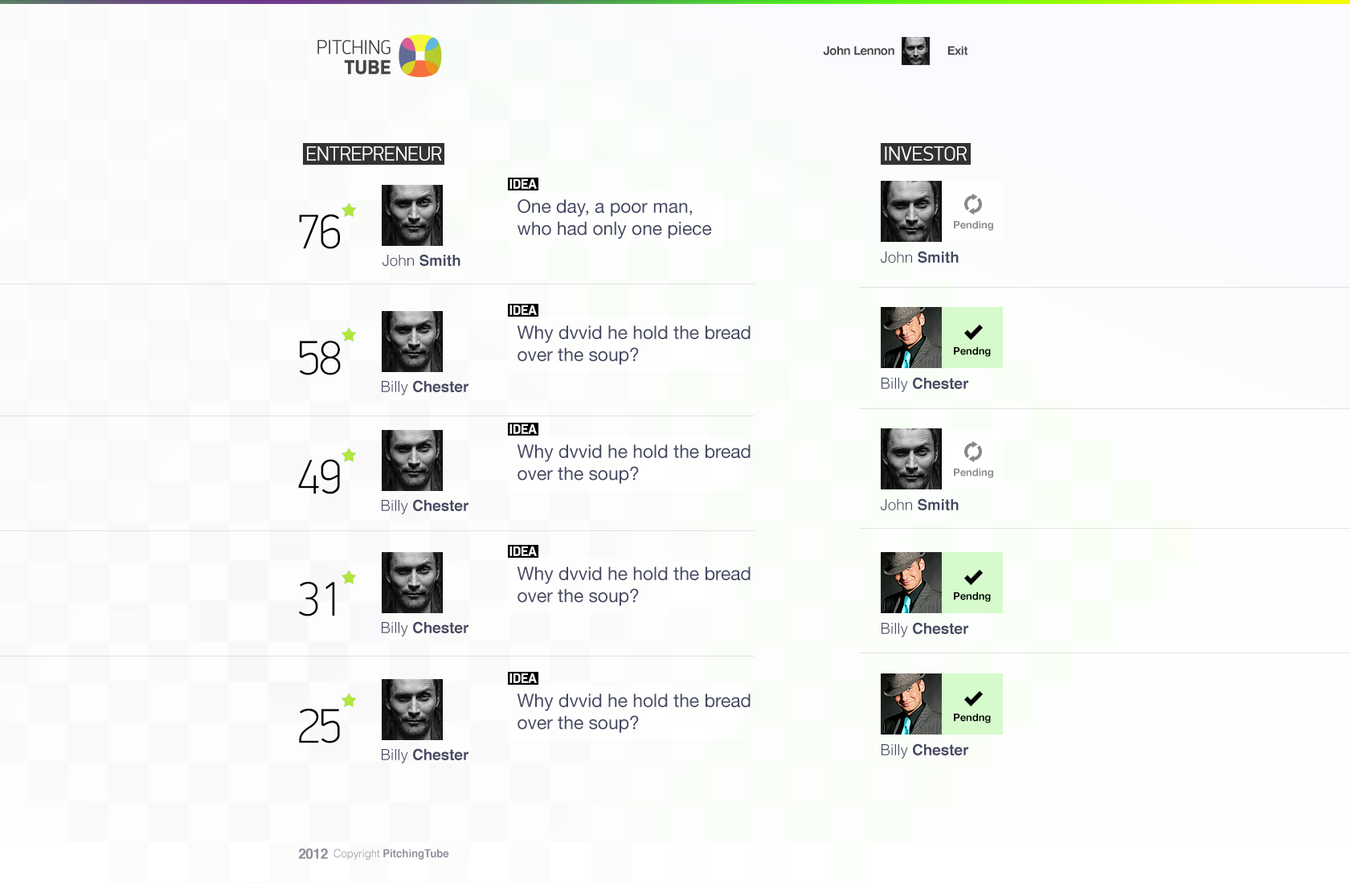
<style>
.page{position:relative;width:1350px;height:884px}
.page>*{position:absolute;margin:0}
.t1{font:20.3px/20.1px "DinDisplayProPF-Light";color:#464646;text-transform:uppercase;scale:0.96 1}
.t2{font:20.3px/20.1px "DinDisplayProPF-Black";color:#464646;text-transform:uppercase;scale:0.96 1}
.t3{font:12px "Helvetica-Bold";letter-spacing:-0.03em;color:#464646}
.t4{font:20.2px "DinDisplayProPF-Light";color:#ffffff;text-transform:uppercase}
.t5{font:13.7px "DinDisplayProPF-Bold";letter-spacing:-0.025em;color:#ffffff;text-transform:uppercase}
.t6{font:18.5px/22.2px "HelveticaNeue";color:#474863}
.t7{font:49px "DinDisplayProPF-Thin";letter-spacing:-0.025em;color:#000000}
.t8{font:10.4px "HelveticaNeue-Bold";color:#8b8c8c}
.t9{font:15.3px "Helvetica-Bold";color:#474863}
.t10{font:15.3px "Helvetica-Light";color:#474863}
.t11{font:10.4px "HelveticaNeue-Bold";color:#000000}
.t12{font:10.4px "HelveticaNeue-Bold";color:#8c8d8c}
.t13{font:14.1px "Helvetica-Bold";letter-spacing:-0.025em;color:#8d8e9b}
.t14{font:11px "Helvetica-Bold";color:#8d8e9b;scale:0.96 1}
.t15{font:11px "Helvetica-Light";color:#8d8e9b;scale:0.96 1}
</style>
<div class="page">
<p class="t1" style="left:317px;top:39px;width:73px;height:36px;text-align:right">Pitching<br><span class="t2">Tube</span></p>
<p class="t3" style="left:823px;top:46px;width:71px;height:9px">John Lennon</p>
<p class="t3" style="left:947px;top:46px;width:20px;height:9px">Exit</p>
<p class="t4" style="left:307px;top:146px;width:135px;height:15px">Entrepreneur</p>
<p class="t4" style="left:884px;top:146px;width:82px;height:15px">Investor</p>
<p class="t5" style="left:509px;top:179px;width:28px;height:10px">Idea</p>
<p class="t6" style="left:517px;top:199px;width:195px;height:40px">One day, a poor man, <br>who had only one piece</p>
<p class="t7" style="left:299px;top:214px;width:41px;height:35px">76</p>
<p class="t8" style="left:953px;top:221px;width:40px;height:10px">Pending</p>
<p class="t9" style="left:382px;top:254px;width:78px;height:12px"><span class="t10">John </span>Smith</p>
<p class="t9" style="left:880px;top:251px;width:78px;height:12px"><span class="t10">John </span>Smith</p>
<p class="t5" style="left:509px;top:305px;width:28px;height:10px">Idea</p>
<p class="t6" style="left:517px;top:325px;width:233px;height:40px">Why dvvid he hold the bread <br>over the soup?</p>
<p class="t7" style="left:299px;top:341px;width:42px;height:34px">58</p>
<p class="t11" style="left:953px;top:347px;width:37px;height:10px">Pendng</p>
<p class="t9" style="left:881px;top:377px;width:87px;height:15px"><span class="t10">Billy </span>Chester</p>
<p class="t9" style="left:382px;top:380px;width:86px;height:15px"><span class="t10">Billy </span>Chester</p>
<p class="t5" style="left:509px;top:424px;width:28px;height:10px">Idea</p>
<p class="t6" style="left:517px;top:444px;width:233px;height:40px">Why dvvid he hold the bread <br>over the soup?</p>
<p class="t7" style="left:298px;top:459px;width:42px;height:35px">49</p>
<p class="t12" style="left:953px;top:468px;width:40px;height:10px">Pending</p>
<p class="t9" style="left:382px;top:499px;width:86px;height:15px"><span class="t10">Billy </span>Chester</p>
<p class="t9" style="left:880px;top:498px;width:78px;height:12px"><span class="t10">John </span>Smith</p>
<p class="t5" style="left:509px;top:546px;width:28px;height:10px">Idea</p>
<p class="t6" style="left:517px;top:566px;width:233px;height:40px">Why dvvid he hold the bread <br>over the soup?</p>
<p class="t7" style="left:298px;top:582px;width:37px;height:34px">31</p>
<p class="t11" style="left:953px;top:592px;width:37px;height:10px">Pendng</p>
<p class="t9" style="left:382px;top:621px;width:86px;height:15px"><span class="t10">Billy </span>Chester</p>
<p class="t9" style="left:881px;top:622px;width:87px;height:15px"><span class="t10">Billy </span>Chester</p>
<p class="t5" style="left:509px;top:673px;width:28px;height:10px">Idea</p>
<p class="t6" style="left:517px;top:693px;width:233px;height:40px">Why dvvid he hold the bread <br>over the soup?</p>
<p class="t7" style="left:299px;top:708px;width:41px;height:35px">25</p>
<p class="t11" style="left:953px;top:713px;width:37px;height:10px">Pendng</p>
<p class="t9" style="left:382px;top:748px;width:86px;height:15px"><span class="t10">Billy </span>Chester</p>
<p class="t9" style="left:881px;top:743px;width:87px;height:15px"><span class="t10">Billy </span>Chester</p>
<p class="t13" style="left:298px;top:847px;width:30px;height:12px">2012</p>
<p class="t14" style="left:333px;top:848px;width:116px;height:12px"><span class="t15">Copyright </span>PitchingTube</p>
</div>
